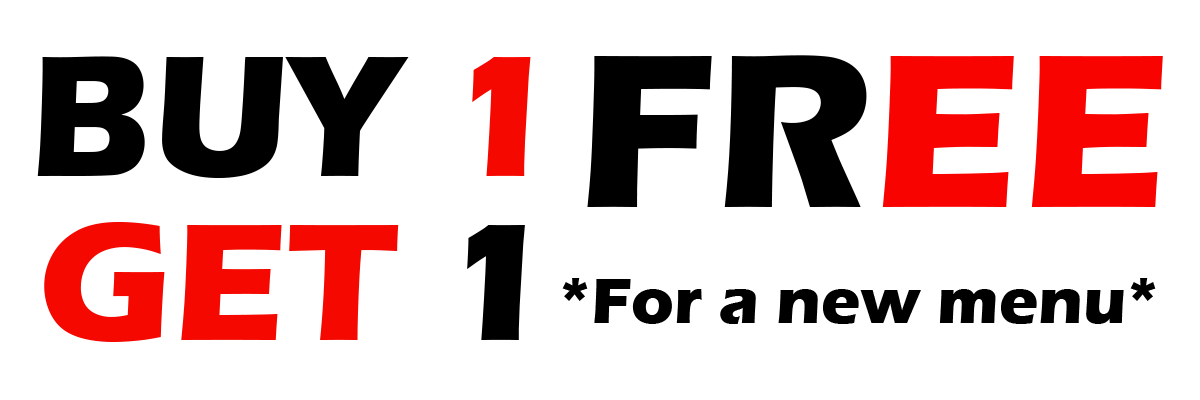
<style>
.page{position:relative;width:1200px;height:400px;background:#ffffff}
.page>*{position:absolute;margin:0}
.t1{font:179px "ErasITC-Bold";color:#000000}
.t2{font:179px "ErasITC-Bold";color:#f60800}
.t3{font:225.7px "ErasITC-Bold";color:#000000}
.t4{font:225.7px "ErasITC-Bold";color:#fa0300}
.t5{font:172.7px "ErasITC-Bold";color:#f50800}
.t6{font:172.7px "ErasITC-Bold";color:#000000}
.t7{font:66.2px "ErasITC-Bold";color:#000000}
</style>
<div class="page">
<p class="t1" style="left:37px;top:56px;width:494px;height:122px">BUY <span class="t2">1</span></p>
<p class="t3" style="left:587px;top:55px;width:576px;height:152px">FR<span class="t4">EE</span></p>
<p class="t5" style="left:44px;top:222px;width:481px;height:120px">GET <span class="t6">1</span></p>
<p class="t7" style="left:562px;top:278px;width:594px;height:46px">*For a new menu*</p>
</div>
